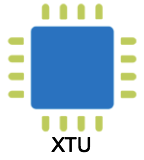
<style>
.page{position:relative;width:144px;height:160px;background:#ffffff}
.page>*{position:absolute;margin:0}
.t1{font:20px "ArialMT";color:#000000}
</style>
<div class="page">
<p class="t1" style="left:51px;top:137px;width:40px;height:16px">XTU</p>
</div>
